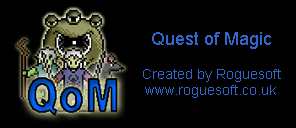
<style>
.page{position:relative;width:296px;height:128px;background:#000000}
.page>*{position:absolute;margin:0}
.t1{font:14px "ArialMT";color:#3366cc}
.t2{font:18px "ArialMT";color:#3366cc}
</style>
<div class="page">
<p class="t1" style="left:143px;top:32px;width:138px;height:66px;text-align:center"><span class="t2">Quest of Magic<br></span><br>Created by Roguesoft<br>www.roguesoft.co.uk</p>
</div>
